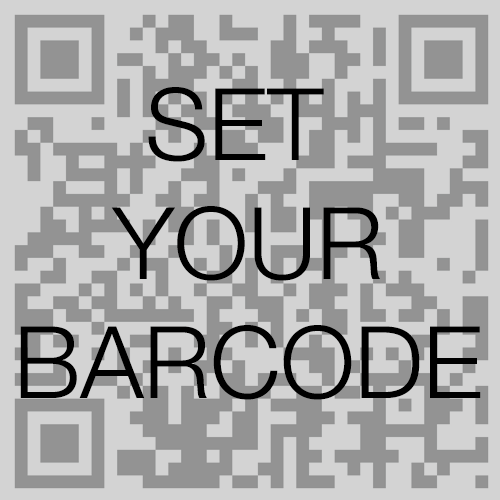
<style>
.page{position:relative;width:500px;height:500px;background:#d3d3d3}
.page>*{position:absolute;margin:0}
.t1{font:100px "HelveticaNeue-Light";color:#000000}
</style>
<div class="page">
<p class="t1" style="left:20px;top:87px;width:461px;height:313px;text-align:center">SET <br>YOUR<br>BARCODE</p>
</div>
